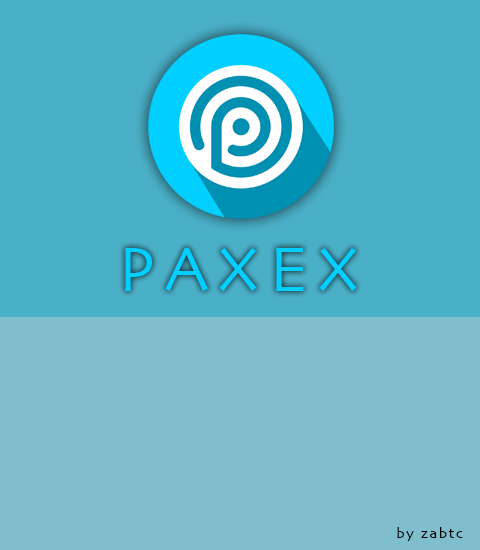
<style>
.page{position:relative;width:480px;height:550px;background:#7ebecd}
.page>*{position:absolute;margin:0}
.t1{font:65px "Skia-Regular";letter-spacing:0.16em;color:#00cfff}
.t2{font:15px "Skia-Regular";letter-spacing:0.1em;color:#010101}
</style>
<div class="page">
<p class="t1" style="left:125px;top:248px;width:232px;height:43px">PAXEX</p>
<p class="t2" style="left:397px;top:527px;width:66px;height:14px">by zabtc</p>
</div>
